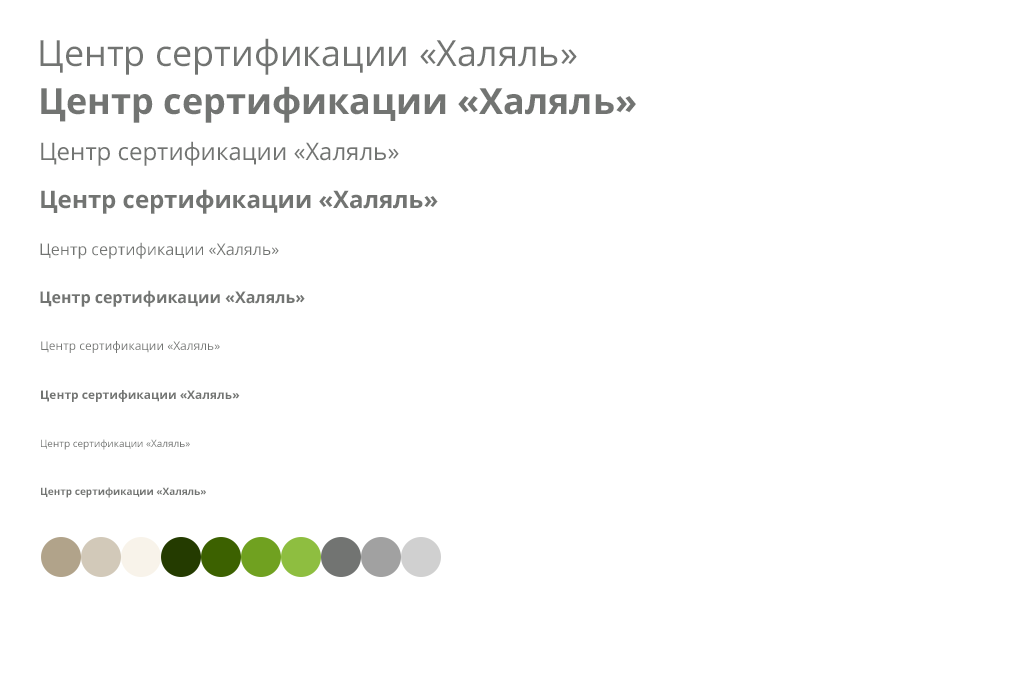
<style>
.page{position:relative;width:1020px;height:700px;background:#ffffff}
.page>*{position:absolute;margin:0}
.t1{font:36px "OpenSans";color:#727472}
.t2{font:36px "OpenSans-Bold";color:#727472}
.t3{font:24px "OpenSans";color:#727472}
.t4{font:24px "OpenSans-Bold";color:#727472}
.t5{font:16px "OpenSans";color:#727472}
.t6{font:16px "OpenSans-Bold";color:#727472}
.t7{font:12px "OpenSans";color:#727472}
.t8{font:12px "OpenSans-Bold";color:#727472}
.t9{font:10px "OpenSans";color:#727472}
.t10{font:10px "OpenSans-Bold";color:#727472}
</style>
<div class="page">
<p class="t1" style="left:40px;top:38px;width:537px;height:37px">Центр сертификации «Халяль»</p>
<p class="t2" style="left:41px;top:86px;width:595px;height:37px">Центр сертификации «Халяль»</p>
<p class="t3" style="left:41px;top:141px;width:358px;height:25px">Центр сертификации «Халяль»</p>
<p class="t4" style="left:41px;top:189px;width:397px;height:25px">Центр сертификации «Халяль»</p>
<p class="t5" style="left:40px;top:242px;width:239px;height:17px">Центр сертификации «Халяль»</p>
<p class="t6" style="left:40px;top:290px;width:265px;height:17px">Центр сертификации «Халяль»</p>
<p class="t7" style="left:41px;top:341px;width:179px;height:12px">Центр сертификации «Халяль»</p>
<p class="t8" style="left:41px;top:390px;width:199px;height:12px">Центр сертификации «Халяль»</p>
<p class="t9" style="left:41px;top:439px;width:149px;height:11px">Центр сертификации «Халяль»</p>
<p class="t10" style="left:41px;top:487px;width:165px;height:11px">Центр сертификации «Халяль»</p>
</div>
